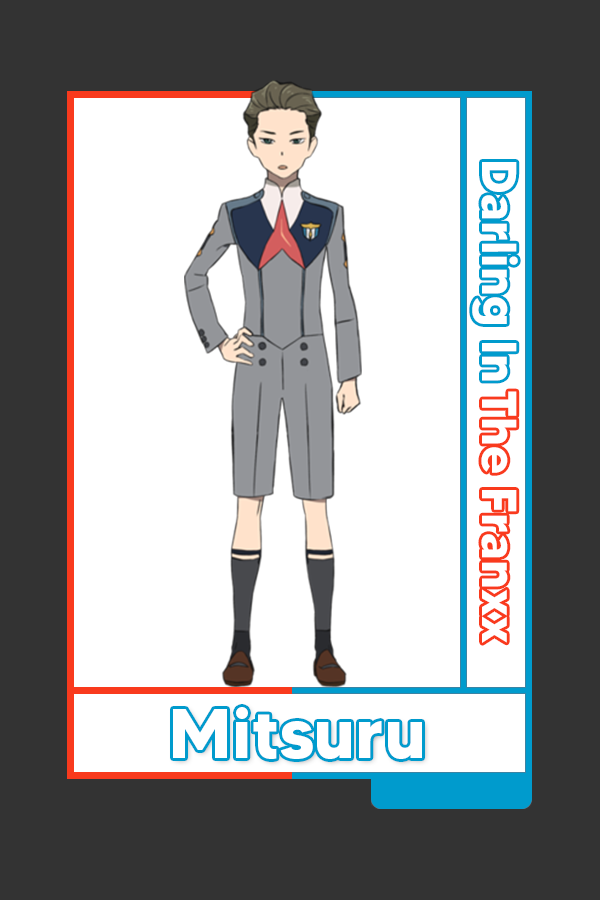
<style>
.page{position:relative;width:600px;height:900px;background:#ffffff}
.page>*{position:absolute;margin:0}
.t1{font:48.8px "MADETOMMY-Bold";color:#ffffff}
.t2{font:70.1px "MADETOMMY-Bold";color:#ffffff}
</style>
<div class="page">
<p class="t1" style="left:472px;top:162px;width:46px;height:219px;rotate:90deg">Darling In</p>
<p class="t1" style="left:481px;top:391px;width:36px;height:252px;rotate:90deg">The Franxx</p>
<p class="t2" style="left:173px;top:707px;width:249px;height:52px">Mitsuru</p>
</div>
